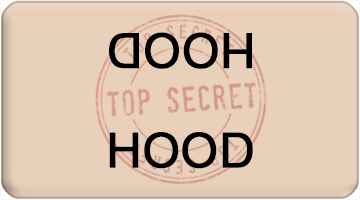
<style>
.page{position:relative;width:360px;height:200px;background:#e8d0bb}
.page>*{position:absolute;margin:0}
.t1{font:48px "ArialMT";color:#000000;font-weight:bold}
</style>
<div class="page">
<p class="t1" style="left:109px;top:32px;width:143px;height:37px;rotate:180deg">HOOD</p>
<p class="t1" style="left:109px;top:132px;width:144px;height:37px">HOOD</p>
</div>
